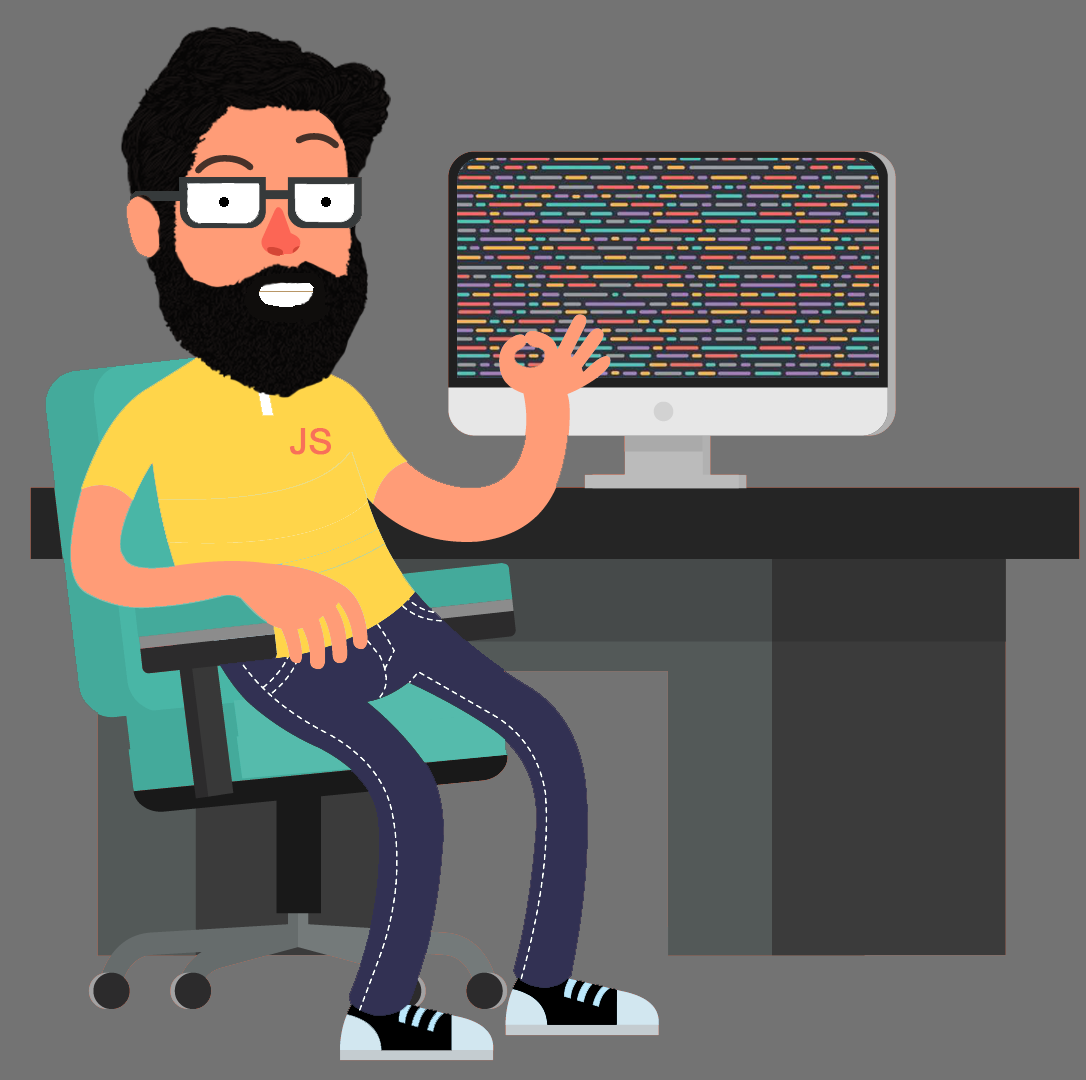
<style>
.page{position:relative;width:1086px;height:1080px;background:#737373}
.page>*{position:absolute;margin:0}
.t1{font:36px "ArialMT";color:#f87059;font-weight:bold}
</style>
<div class="page">
<p class="t1" style="left:289px;top:428px;width:42px;height:27px">JS</p>
</div>
